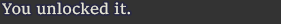
<style>
.page{position:relative;width:281px;height:24px;background:#333333}
.page>*{position:absolute;margin:0}
.t1{font:16px "Sitka-Small";color:#dedece}
</style>
<div class="page">
<p class="t1" style="left:2px;top:2px;width:128px;height:13px">You unlocked it.</p>
</div>
